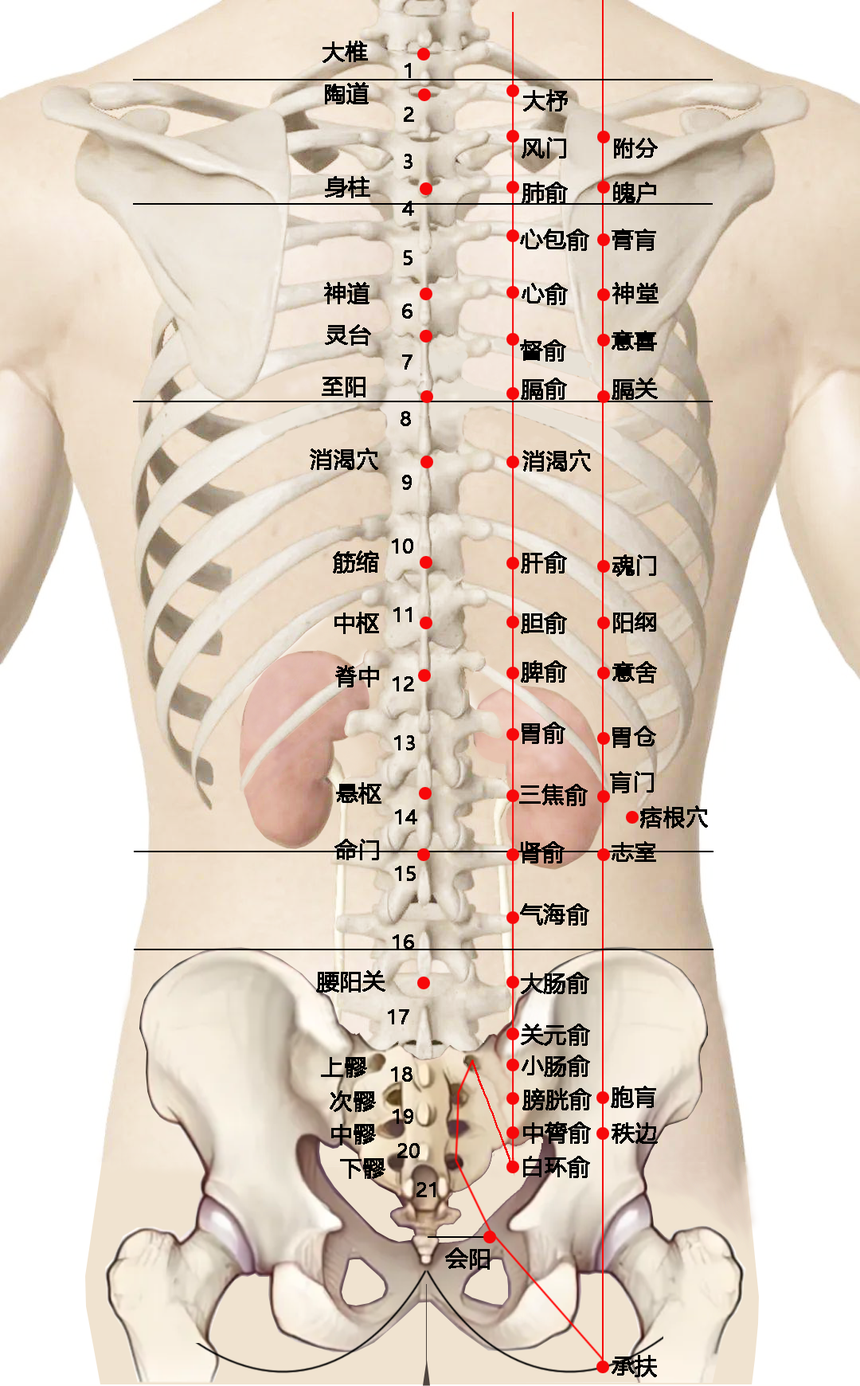
<style>
.page{position:relative;width:860px;height:1386px}
.page>*{position:absolute;margin:0}
.t1{font:22.3px "MicrosoftYaHei";color:#000000;font-weight:bold}
.t2{font:19.1px "MicrosoftYaHei";color:#000000;font-weight:bold}
</style>
<div class="page">
<p class="t1" style="left:323px;top:41px;width:45px;height:22px">大椎</p>
<p class="t2" style="left:405px;top:63px;width:6px;height:15px">1</p>
<p class="t1" style="left:325px;top:82px;width:44px;height:22px">陶道</p>
<p class="t1" style="left:523px;top:89px;width:45px;height:23px">大杼</p>
<p class="t2" style="left:404px;top:107px;width:10px;height:15px">2</p>
<p class="t1" style="left:522px;top:137px;width:44px;height:22px">风门</p>
<p class="t1" style="left:614px;top:138px;width:44px;height:21px">附分</p>
<p class="t2" style="left:404px;top:154px;width:9px;height:15px">3</p>
<p class="t1" style="left:325px;top:176px;width:45px;height:22px">身柱</p>
<p class="t1" style="left:522px;top:182px;width:46px;height:22px">肺俞</p>
<p class="t1" style="left:613px;top:182px;width:43px;height:22px">魄户</p>
<p class="t2" style="left:402px;top:201px;width:12px;height:15px">4</p>
<p class="t1" style="left:520px;top:229px;width:69px;height:22px">心包俞</p>
<p class="t1" style="left:612px;top:229px;width:44px;height:22px">膏肓</p>
<p class="t2" style="left:404px;top:250px;width:9px;height:15px">5</p>
<p class="t1" style="left:324px;top:282px;width:46px;height:22px">神道</p>
<p class="t1" style="left:613px;top:282px;width:46px;height:22px">神堂</p>
<p class="t1" style="left:522px;top:283px;width:46px;height:22px">心俞</p>
<p class="t2" style="left:402px;top:303px;width:11px;height:16px">6</p>
<p class="t1" style="left:325px;top:324px;width:46px;height:22px">灵台</p>
<p class="t1" style="left:612px;top:330px;width:45px;height:21px">意喜</p>
<p class="t1" style="left:520px;top:339px;width:46px;height:23px">督俞</p>
<p class="t2" style="left:402px;top:354px;width:11px;height:16px">7</p>
<p class="t1" style="left:322px;top:377px;width:44px;height:20px">至阳</p>
<p class="t1" style="left:521px;top:378px;width:46px;height:22px">膈俞</p>
<p class="t1" style="left:612px;top:378px;width:46px;height:22px">膈关</p>
<p class="t2" style="left:401px;top:411px;width:10px;height:15px">8</p>
<p class="t1" style="left:310px;top:448px;width:68px;height:22px">消渴穴</p>
<p class="t1" style="left:523px;top:449px;width:68px;height:23px">消渴穴</p>
<p class="t2" style="left:402px;top:475px;width:10px;height:15px">9</p>
<p class="t2" style="left:392px;top:538px;width:21px;height:16px">10</p>
<p class="t1" style="left:333px;top:550px;width:46px;height:24px">筋缩</p>
<p class="t1" style="left:521px;top:551px;width:46px;height:23px">肝俞</p>
<p class="t1" style="left:613px;top:554px;width:43px;height:23px">魂门</p>
<p class="t1" style="left:335px;top:612px;width:44px;height:22px">中枢</p>
<p class="t2" style="left:394px;top:607px;width:18px;height:15px">11</p>
<p class="t1" style="left:521px;top:612px;width:46px;height:22px">胆俞</p>
<p class="t1" style="left:613px;top:612px;width:43px;height:21px">阳纲</p>
<p class="t1" style="left:335px;top:665px;width:44px;height:22px">脊中</p>
<p class="t1" style="left:521px;top:660px;width:46px;height:23px">脾俞</p>
<p class="t1" style="left:613px;top:661px;width:44px;height:22px">意舍</p>
<p class="t2" style="left:393px;top:676px;width:21px;height:15px">12</p>
<p class="t1" style="left:522px;top:722px;width:44px;height:22px">胃俞</p>
<p class="t1" style="left:613px;top:726px;width:43px;height:22px">胃仓</p>
<p class="t2" style="left:394px;top:735px;width:21px;height:15px">13</p>
<p class="t1" style="left:610px;top:771px;width:44px;height:22px">肓门</p>
<p class="t1" style="left:336px;top:782px;width:46px;height:23px">悬枢</p>
<p class="t1" style="left:519px;top:784px;width:69px;height:22px">三焦俞</p>
<p class="t2" style="left:395px;top:809px;width:22px;height:15px">14</p>
<p class="t1" style="left:640px;top:805px;width:68px;height:23px">痞根穴</p>
<p class="t1" style="left:335px;top:839px;width:44px;height:21px">命门</p>
<p class="t1" style="left:521px;top:841px;width:44px;height:22px">肾俞</p>
<p class="t1" style="left:612px;top:841px;width:44px;height:21px">志室</p>
<p class="t2" style="left:395px;top:866px;width:21px;height:15px">15</p>
<p class="t1" style="left:520px;top:903px;width:69px;height:23px">气海俞</p>
<p class="t2" style="left:393px;top:934px;width:21px;height:16px">16</p>
<p class="t1" style="left:316px;top:970px;width:70px;height:23px">腰阳关</p>
<p class="t1" style="left:521px;top:972px;width:68px;height:22px">大肠俞</p>
<p class="t2" style="left:388px;top:1009px;width:21px;height:15px">17</p>
<p class="t1" style="left:521px;top:1024px;width:69px;height:22px">关元俞</p>
<p class="t1" style="left:321px;top:1057px;width:46px;height:21px">上髎</p>
<p class="t1" style="left:522px;top:1055px;width:68px;height:22px">小肠俞</p>
<p class="t2" style="left:391px;top:1067px;width:22px;height:15px">18</p>
<p class="t1" style="left:611px;top:1086px;width:45px;height:22px">胞肓</p>
<p class="t1" style="left:330px;top:1091px;width:46px;height:21px">次髎</p>
<p class="t1" style="left:523px;top:1088px;width:69px;height:22px">膀胱俞</p>
<p class="t2" style="left:393px;top:1109px;width:20px;height:15px">19</p>
<p class="t1" style="left:523px;top:1122px;width:68px;height:22px">中膂俞</p>
<p class="t1" style="left:331px;top:1124px;width:45px;height:21px">中髎</p>
<p class="t1" style="left:612px;top:1122px;width:46px;height:22px">秩边</p>
<p class="t2" style="left:397px;top:1143px;width:23px;height:15px">20</p>
<p class="t1" style="left:523px;top:1156px;width:67px;height:22px">白环俞</p>
<p class="t1" style="left:340px;top:1158px;width:46px;height:21px">下髎</p>
<p class="t2" style="left:417px;top:1182px;width:19px;height:15px">21</p>
<p class="t1" style="left:445px;top:1247px;width:45px;height:23px">会阳</p>
<p class="t1" style="left:612px;top:1355px;width:45px;height:22px">承扶</p>
</div>
